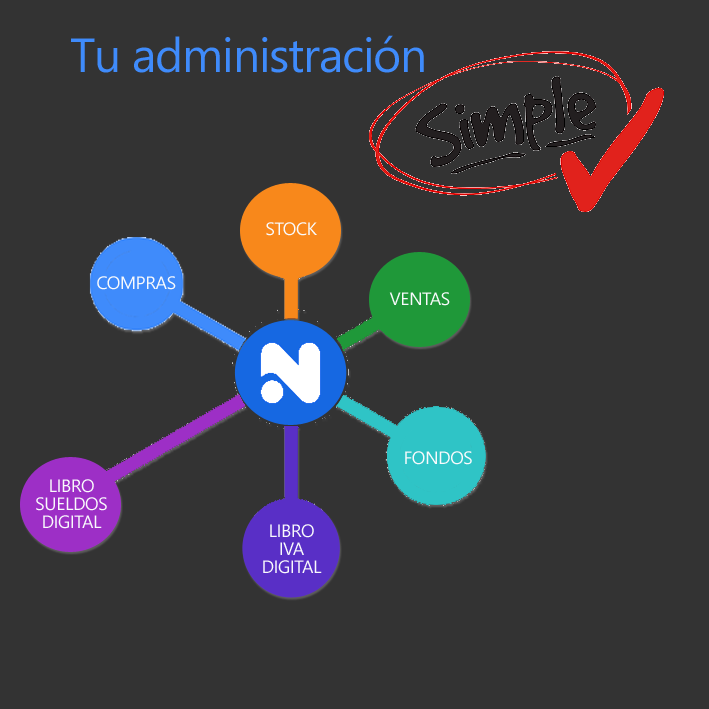
<style>
.page{position:relative;width:709px;height:709px;background:#333333}
.page>*{position:absolute;margin:0}
.t1{font:48px "SegoeUI";letter-spacing:-0.025em;color:#3f8bfb}
.t2{font:18px "SegoeUI";letter-spacing:-0.025em;color:#f9fafc}
.t3{font:18px/18px "SegoeUI";letter-spacing:-0.025em;color:#f9fafc}
</style>
<div class="page">
<p class="t1" style="left:71px;top:35px;width:353px;height:38px">Tu administración</p>
<p class="t2" style="left:266px;top:222px;width:51px;height:14px">STOCK</p>
<p class="t2" style="left:97px;top:276px;width:79px;height:14px">COMPRAS</p>
<p class="t2" style="left:389px;top:292px;width:61px;height:14px">VENTAS</p>
<p class="t2" style="left:405px;top:451px;width:67px;height:14px">FONDOS</p>
<p class="t3" style="left:36px;top:479px;width:71px;height:50px;text-align:center">LIBRO<br>SUELDOS<br>DIGITAL</p>
<p class="t3" style="left:263px;top:524px;width:59px;height:50px;text-align:center">LIBRO<br>IVA<br>DIGITAL</p>
</div>
